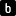
<style>
.page{position:relative;width:16px;height:16px;background:#000000}
.page>*{position:absolute;margin:0}
.t1{font:12.5px "NovaMonoForPowerline";color:#ffffff}
</style>
<div class="page">
<p class="t1" style="left:5px;top:3px;width:6px;height:10px">b</p>
</div>
